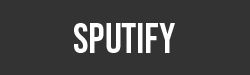
<style>
.page{position:relative;width:250px;height:75px;background:#333333}
.page>*{position:absolute;margin:0}
.t1{font:41.7px "BebasNeue-Regular";color:#ffffff}
</style>
<div class="page">
<p class="t1" style="left:74px;top:23px;width:101px;height:30px">SPUTIFY</p>
</div>
